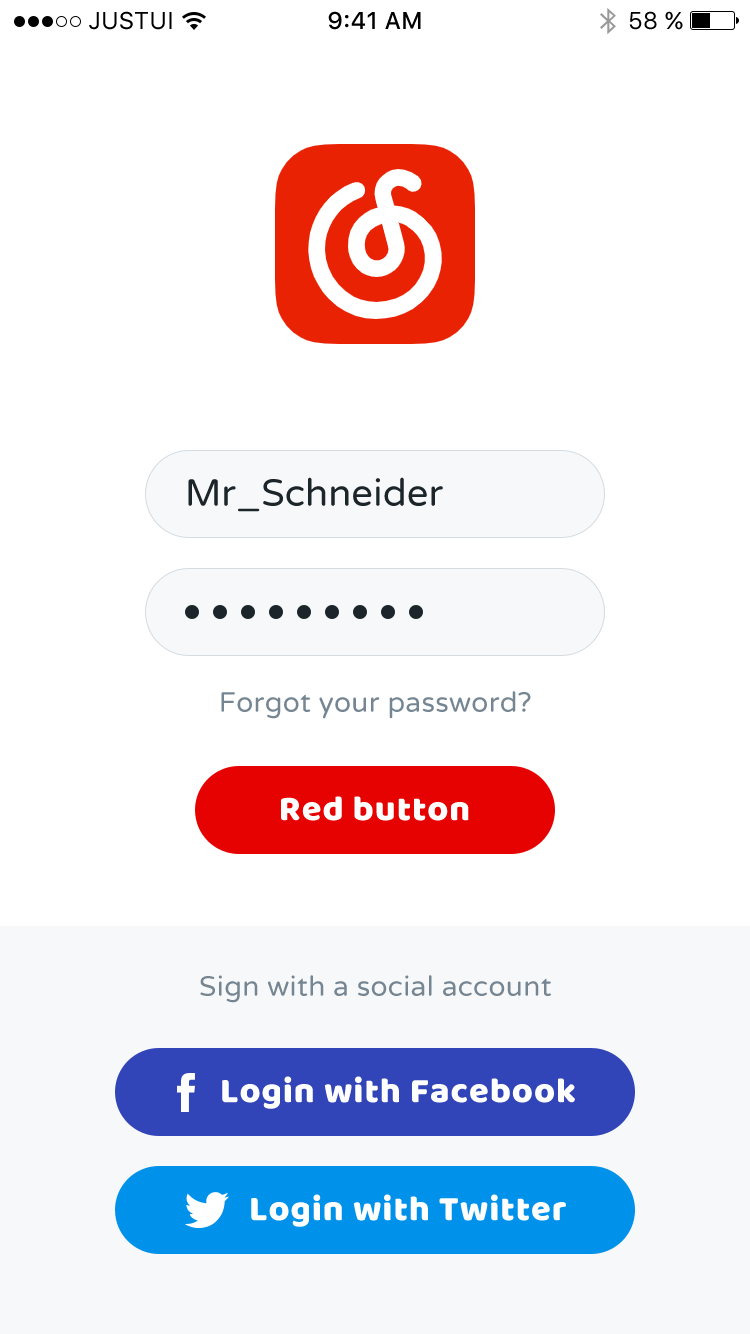
<style>
.page{position:relative;width:750px;height:1334px;background:#ffffff}
.page>*{position:absolute;margin:0}
.t1{font:24px "SFUIText-Regular";color:#000000}
.t2{font:24px "SFUIText-Medium";color:#000000}
.t3{font:38px "VarelaRound-Regular";color:#1c252a}
.t4{font:28px "VarelaRound-Regular";letter-spacing:0.012em;color:#758692}
.t5{font:36px "BalooBhai-Regular";letter-spacing:0.026em;color:#ffffff}
</style>
<div class="page">
<p class="t1" style="left:89px;top:11px;width:83px;height:19px">JUSTUI</p>
<p class="t2" style="left:328px;top:11px;width:93px;height:19px">9:41 AM</p>
<p class="t1" style="left:629px;top:11px;width:54px;height:19px">58 %</p>
<p class="t3" style="left:188px;top:477px;width:255px;height:35px">Mr_Schneider</p>
<p class="t4" style="left:221px;top:691px;width:310px;height:28px">Forgot your password?</p>
<p class="t4" style="left:200px;top:975px;width:351px;height:28px">Sign with a social account</p>
<p class="t5" style="left:222px;top:1076px;width:353px;height:33px">Login with Facebook</p>
<p class="t5" style="left:251px;top:1194px;width:315px;height:33px">Login with Twitter</p>
</div>
